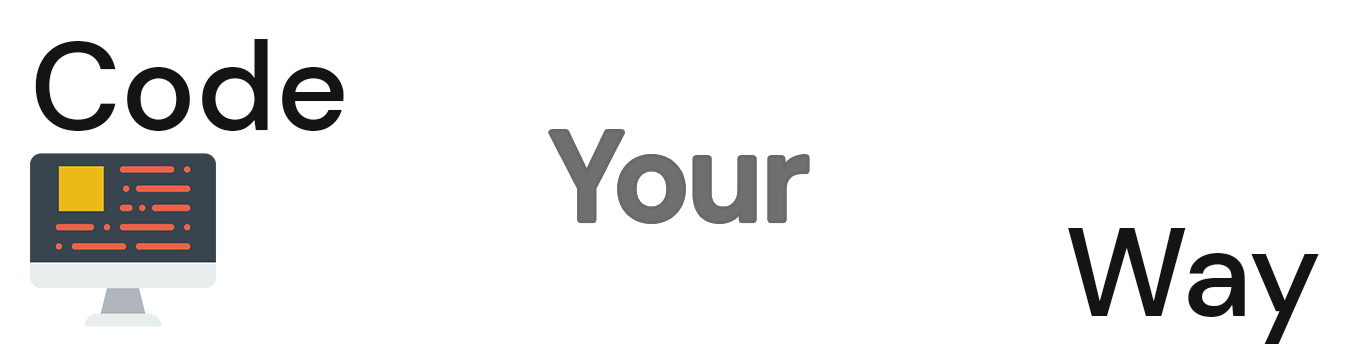
<style>
.page{position:relative;width:1350px;height:360px;background:#ffffff}
.page>*{position:absolute;margin:0}
.t1{font:125px "DMSans-Medium";color:#141414}
.t2{font:125px "DMSans-Medium";color:#6f6f6f}
</style>
<div class="page">
<p class="t1" style="left:35px;top:39px;width:309px;height:92px">Code</p>
<p class="t2" style="left:551px;top:132px;width:256px;height:89px">Your</p>
<p class="t1" style="left:1068px;top:228px;width:251px;height:116px">Way</p>
</div>
